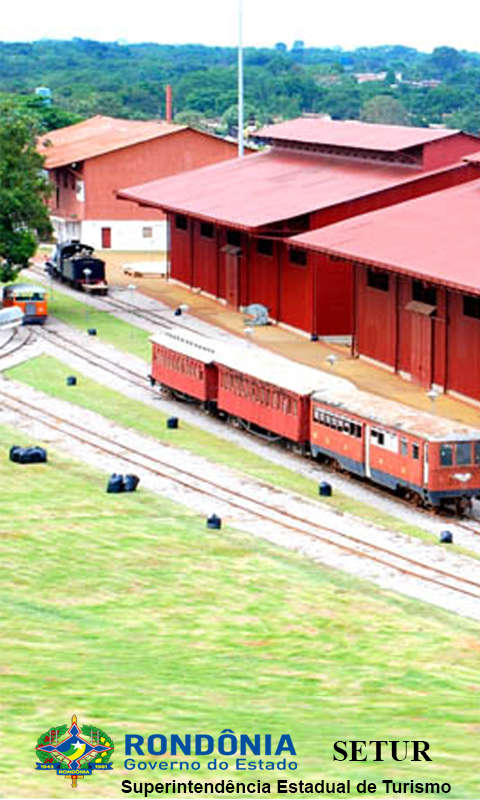
<style>
.page{position:relative;width:480px;height:800px}
.page>*{position:absolute;margin:0}
.t1{font:30px "TimesNewRomanPS-BoldMT";color:#000000}
.t2{font:18px "Arial-BoldMT";color:#000000}
</style>
<div class="page">
<p class="t1" style="left:333px;top:741px;width:100px;height:20px">SETUR</p>
<p class="t2" style="left:121px;top:780px;width:330px;height:17px">Superintendência Estadual de Turismo</p>
</div>
